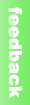
<style>
.page{position:relative;width:30px;height:105px}
.page>*{position:absolute;margin:0}
.t1{font:18px "Arial-Black";color:#fefefe}
</style>
<div class="page">
<p class="t1" style="left:8px;top:7px;width:15px;height:91px;rotate:90deg">feedback</p>
</div>
